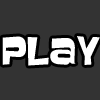
<style>
.page{position:relative;width:100px;height:100px;background:#333333}
.page>*{position:absolute;margin:0}
.t1{font:34px "Baveuse";color:#fffefe}
</style>
<div class="page">
<p class="t1" style="left:2px;top:36px;width:98px;height:30px">Play</p>
</div>
